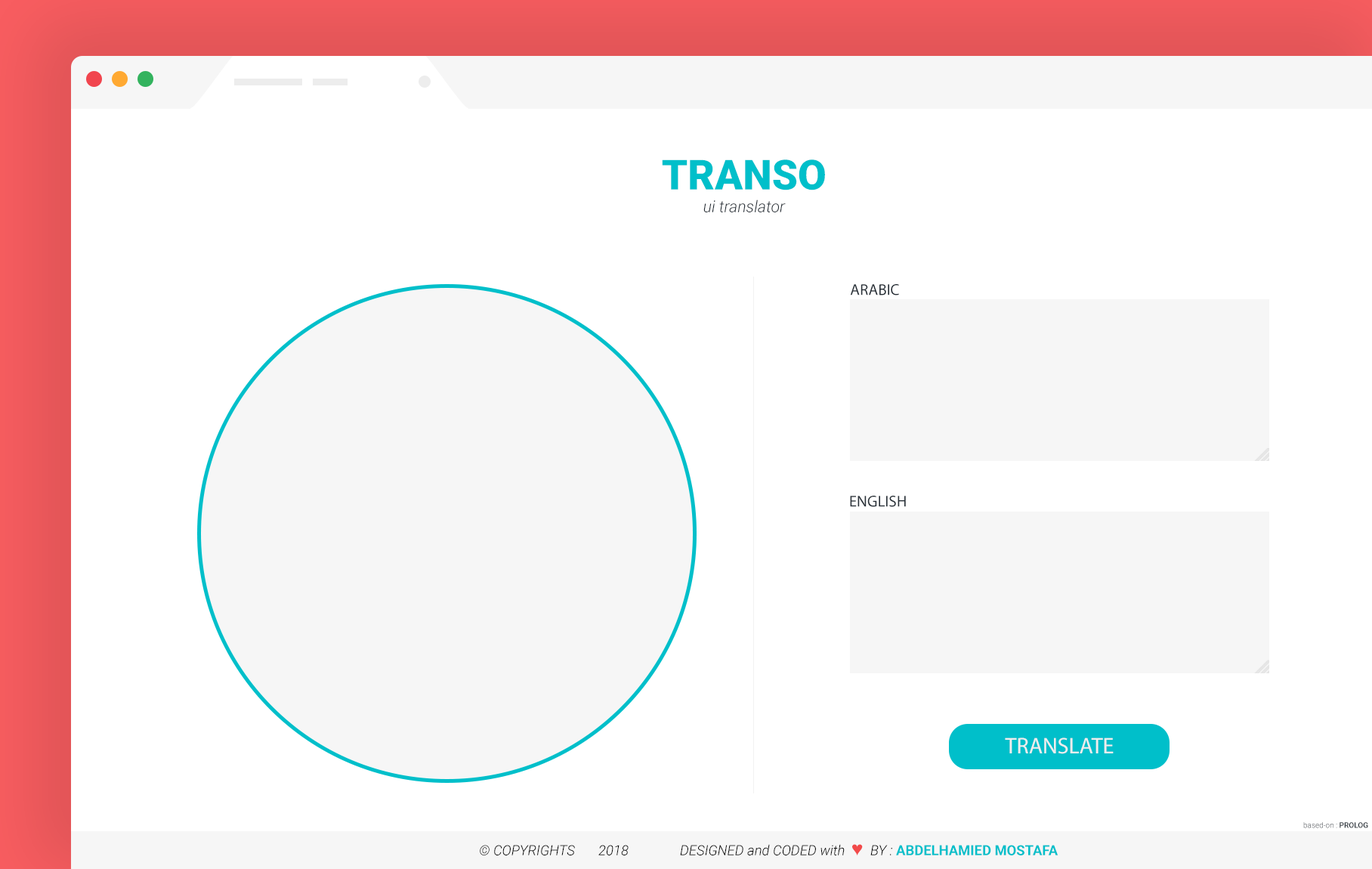
<style>
.page{position:relative;width:1372px;height:869px;background:#ffffff}
.page>*{position:absolute;margin:0}
.t1{font:41.4px "Roboto-Black";color:#00bfca}
.t2{font:16px "Roboto-LightItalic";color:#272f37}
.t3{font:15.8px "MyriadPro-Regular";color:#272f37}
.t4{font:22.6px "MyriadPro-Regular";color:#eeeeee}
.t5{font:7.6px "Roboto-Light";color:#272f37}
.t6{font:7.6px "Roboto-Medium";color:#272f37}
.t7{font:13.9px "Roboto-LightItalic";color:#000000}
.t8{font:18.1px "TimesNewRomanPSMT";color:#f24a4a}
.t9{font:13.9px "Roboto-Bold";color:#00bfca}
</style>
<div class="page">
<p class="t1" style="left:662px;top:159px;width:163px;height:31px">TRANSO</p>
<p class="t2" style="left:703px;top:199px;width:83px;height:13px">ui translator</p>
<p class="t3" style="left:850px;top:284px;width:49px;height:11px">ARABIC</p>
<p class="t3" style="left:850px;top:496px;width:56px;height:11px">ENGLISH</p>
<p class="t4" style="left:1005px;top:737px;width:109px;height:17px">TRANSLATE</p>
<p class="t5" style="left:1303px;top:822px;width:65px;height:6px">based-on : <span class="t6">PROLOG</span></p>
<p class="t7" style="left:480px;top:845px;width:149px;height:10px">© COPYRIGHTS       2018</p>
<p class="t7" style="left:680px;top:844px;width:379px;height:12px">DESIGNED and CODED with  <span class="t8">♥ </span> BY : <span class="t9">ABDELHAMIED MOSTAFA</span></p>
</div>
